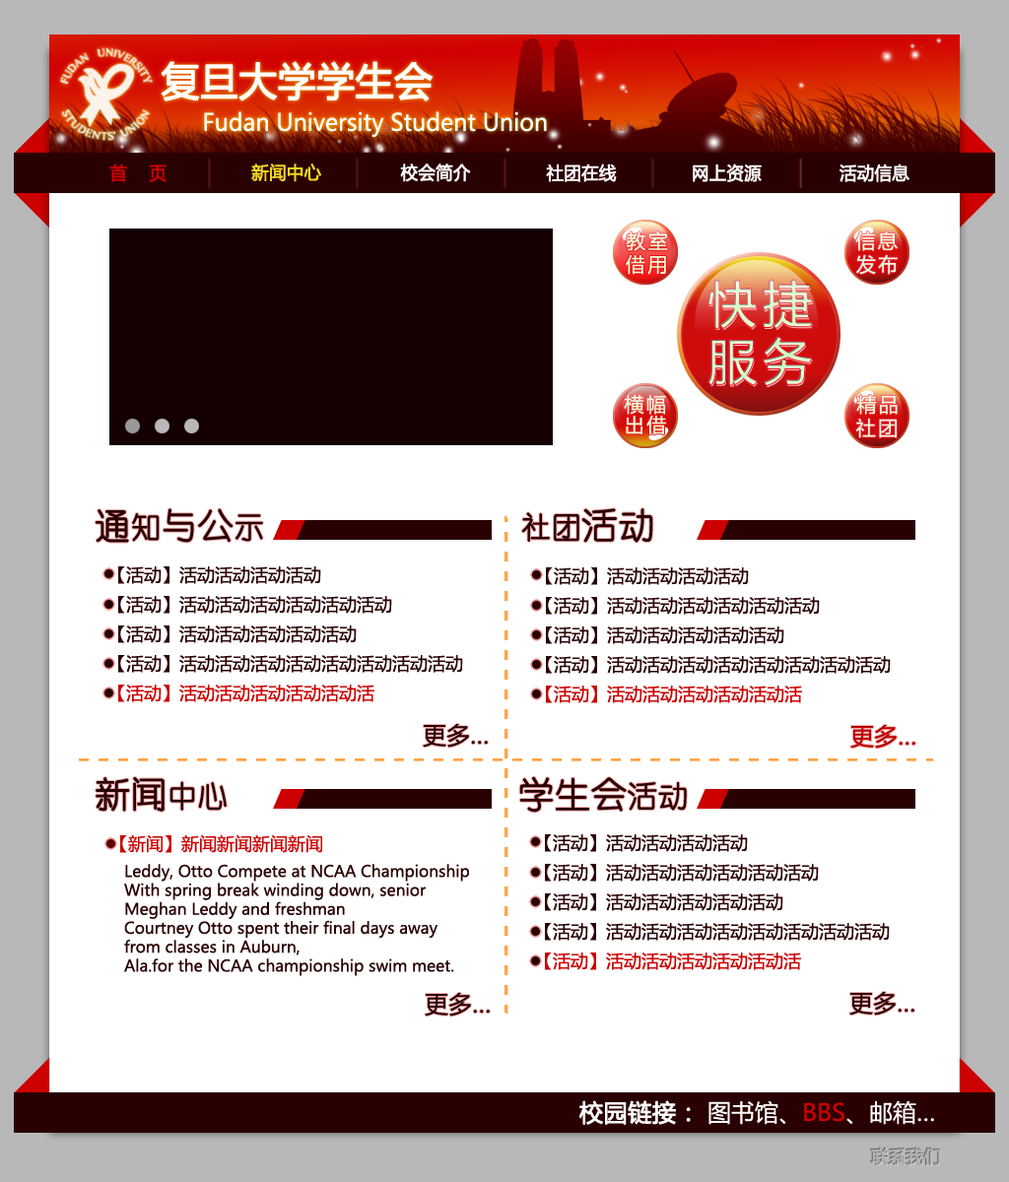
<style>
.page{position:relative;width:1009px;height:1182px;background:#ffffff}
.page>*{position:absolute;margin:0}
.t1{font:17.7px "MicrosoftYaHei";color:#cc0000;font-weight:bold;scale:0.96 1}
.t2{font:17.7px "MicrosoftYaHei";color:#f0d621;font-weight:bold;scale:0.96 1}
.t3{font:17.7px "MicrosoftYaHei";color:#ffffff;font-weight:bold;scale:0.96 1}
.t4{font:35.5px "YouYuan";color:#2a0102;font-weight:bold}
.t5{font:29.6px "YouYuan";color:#2a0102;font-weight:bold}
.t6{font:17.7px "MicrosoftYaHei";color:#2a0102}
.t7{font:17.7px "MicrosoftYaHei";color:#cc0000}
.t8{font:23.6px "MicrosoftYaHei";color:#2a0102}
.t9{font:23.6px "MicrosoftYaHei"}
.t10{font:15.8px "MicrosoftYaHei";color:#2a0102}
.t11{font:23.6px "MicrosoftYaHei";color:#ffffff;font-weight:bold}
.t12{font:23.6px "MicrosoftYaHei";color:#ffffff}
.t13{font:23.6px "MicrosoftYaHei";color:#cc0000}
.t14{font:17.7px "MicrosoftYaHei";font-weight:bold;scale:0.96 1}
</style>
<div class="page">
<p class="t1" style="left:109px;top:164px;width:57px;height:18px">首    页</p>
<p class="t2" style="left:251px;top:164px;width:71px;height:18px">新闻中心</p>
<p class="t3" style="left:400px;top:164px;width:71px;height:18px">校会简介</p>
<p class="t3" style="left:546px;top:164px;width:71px;height:18px">社团在线</p>
<p class="t3" style="left:693px;top:164px;width:68px;height:18px">网上资源</p>
<p class="t3" style="left:839px;top:164px;width:70px;height:18px">活动信息</p>
<p class="t4" style="left:95px;top:508px;width:168px;height:35px">通<span class="t5">知</span>与公<span class="t5">示</span></p>
<p class="t5" style="left:521px;top:508px;width:132px;height:35px">社团<span class="t4">活动</span></p>
<p class="t6" style="left:118px;top:566px;width:203px;height:18px">【活动】活动活动活动活动</p>
<p class="t6" style="left:546px;top:567px;width:203px;height:18px">【活动】活动活动活动活动</p>
<p class="t6" style="left:118px;top:596px;width:274px;height:18px">【活动】活动活动活动活动活动活动</p>
<p class="t6" style="left:546px;top:597px;width:274px;height:18px">【活动】活动活动活动活动活动活动</p>
<p class="t6" style="left:118px;top:626px;width:239px;height:17px">【活动】活动活动活动活动活动</p>
<p class="t6" style="left:546px;top:627px;width:238px;height:17px">【活动】活动活动活动活动活动</p>
<p class="t6" style="left:118px;top:655px;width:345px;height:18px">【活动】活动活动活动活动活动活动活动活动</p>
<p class="t6" style="left:546px;top:656px;width:345px;height:18px">【活动】活动活动活动活动活动活动活动活动</p>
<p class="t7" style="left:118px;top:685px;width:256px;height:17px">【活动】活动活动活动活动活动活</p>
<p class="t7" style="left:546px;top:686px;width:256px;height:17px">【活动】活动活动活动活动活动活</p>
<p class="t8" style="left:423px;top:724px;width:65px;height:24px">更多…</p>
<p class="t9" style="left:850px;top:725px;width:65px;height:24px">更多…</p>
<p class="t4" style="left:96px;top:777px;width:131px;height:35px">新闻<span class="t5">中心</span></p>
<p class="t4" style="left:519px;top:776px;width:168px;height:37px">学生会<span class="t5">活动</span></p>
<p class="t7" style="left:120px;top:834px;width:202px;height:19px">【新闻】新闻新闻新闻新闻</p>
<p class="t6" style="left:545px;top:834px;width:203px;height:18px">【活动】活动活动活动活动</p>
<p class="t10" style="left:124px;top:864px;width:345px;height:112px">Leddy, Otto Compete at NCAA Championship<br>With spring break winding down, senior Meghan Leddy and freshman <br>Courtney Otto spent their final days away from classes in Auburn, <br>Ala.for the NCAA championship swim meet.</p>
<p class="t6" style="left:545px;top:864px;width:274px;height:18px">【活动】活动活动活动活动活动活动</p>
<p class="t6" style="left:545px;top:893px;width:238px;height:18px">【活动】活动活动活动活动活动</p>
<p class="t6" style="left:545px;top:923px;width:345px;height:18px">【活动】活动活动活动活动活动活动活动活动</p>
<p class="t7" style="left:545px;top:953px;width:256px;height:17px">【活动】活动活动活动活动活动活</p>
<p class="t8" style="left:425px;top:993px;width:65px;height:24px">更多…</p>
<p class="t8" style="left:849px;top:992px;width:65px;height:24px">更多…</p>
<p class="t11" style="left:578px;top:1100px;width:113px;height:25px">校园链接：</p>
<p class="t12" style="left:708px;top:1100px;width:226px;height:25px">图书馆、<span class="t13">BBS</span>、邮箱…</p>
<p class="t14" style="left:870px;top:1147px;width:70px;height:18px">联系我们</p>
</div>
